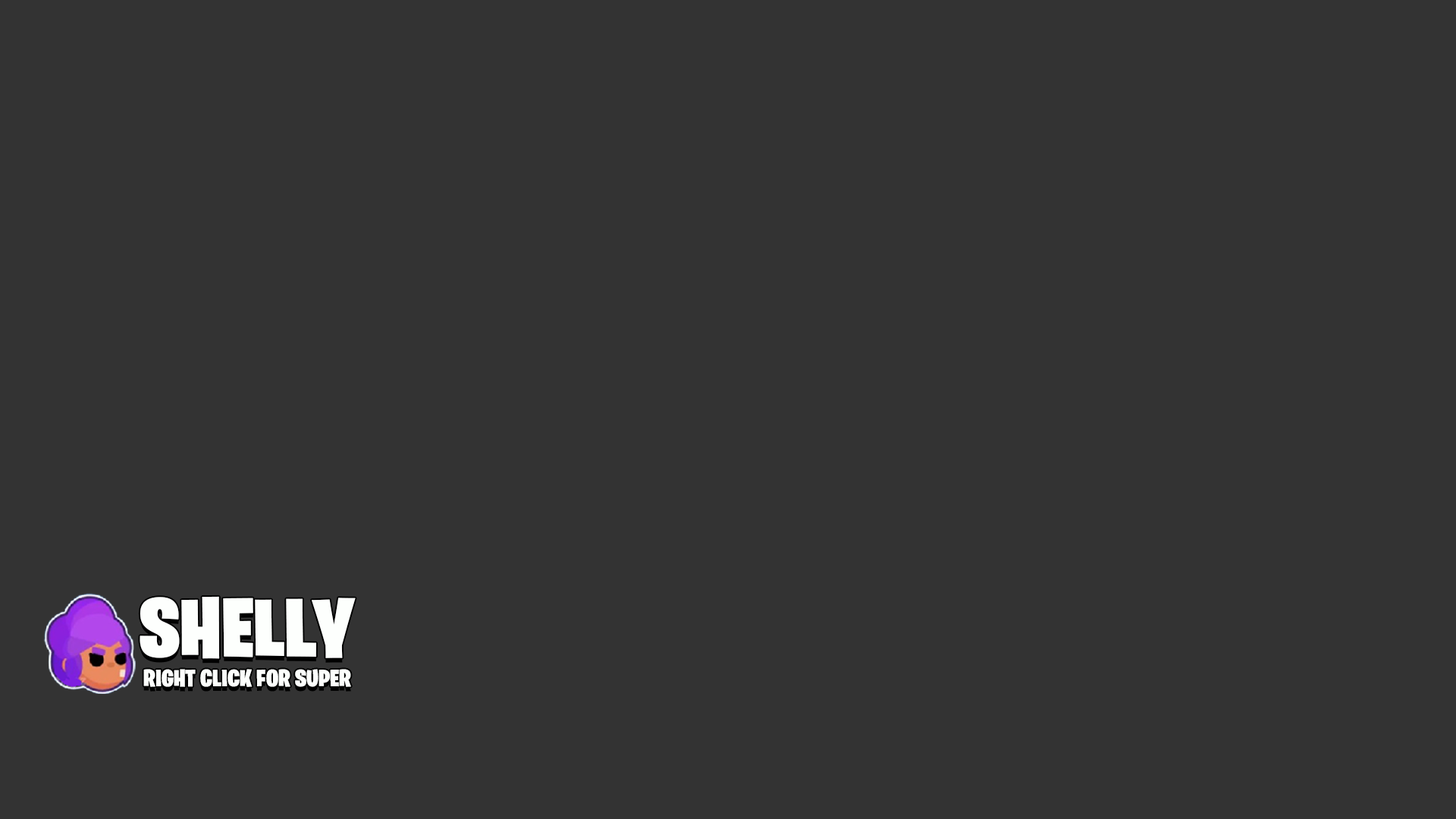
<style>
.page{position:relative;width:1456px;height:819px;background:#333333}
.page>*{position:absolute;margin:0}
.t1{font:84px "BurbankBigCondensed-Black";color:#fdfffd;scale:1.08 1}
.t2{font:23.9px "BurbankBigCondensed-Black";color:#fdfffd;scale:1.08 1}
</style>
<div class="page">
<p class="t1" style="left:140px;top:596px;width:216px;height:63px">SHELLY</p>
<p class="t2" style="left:143px;top:669px;width:208px;height:18px">RIGHT CLICK FOR SUPER</p>
</div>
